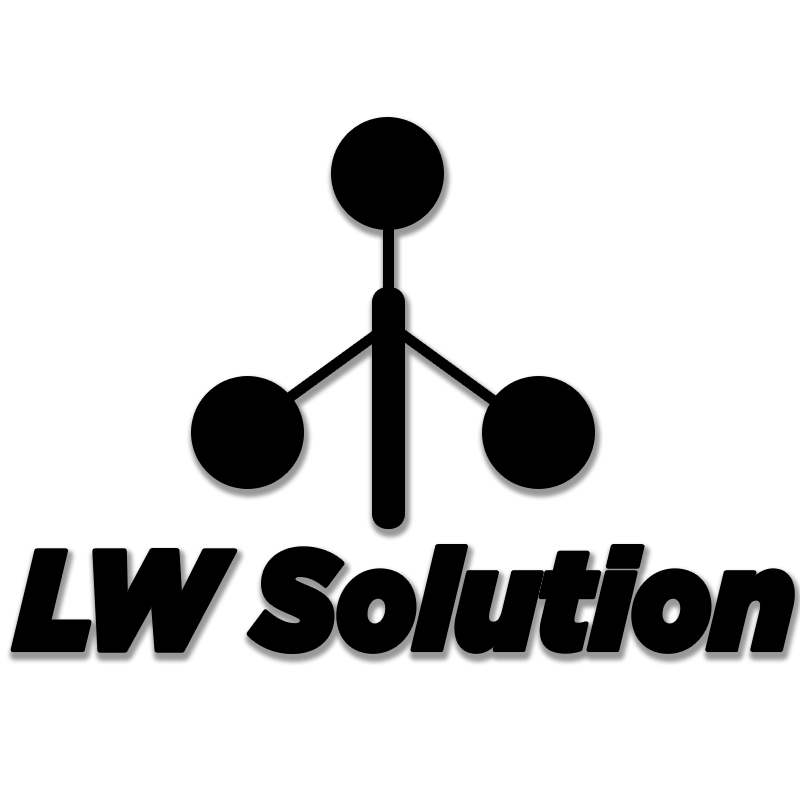
<style>
.page{position:relative;width:800px;height:800px;background:#ffffff}
.page>*{position:absolute;margin:0}
.t1{font:142.4px "Gotham-UltraItalic";color:#000000;scale:0.89 1}
</style>
<div class="page">
<p class="t1" style="left:12px;top:546px;width:781px;height:106px">LW Solution</p>
</div>
